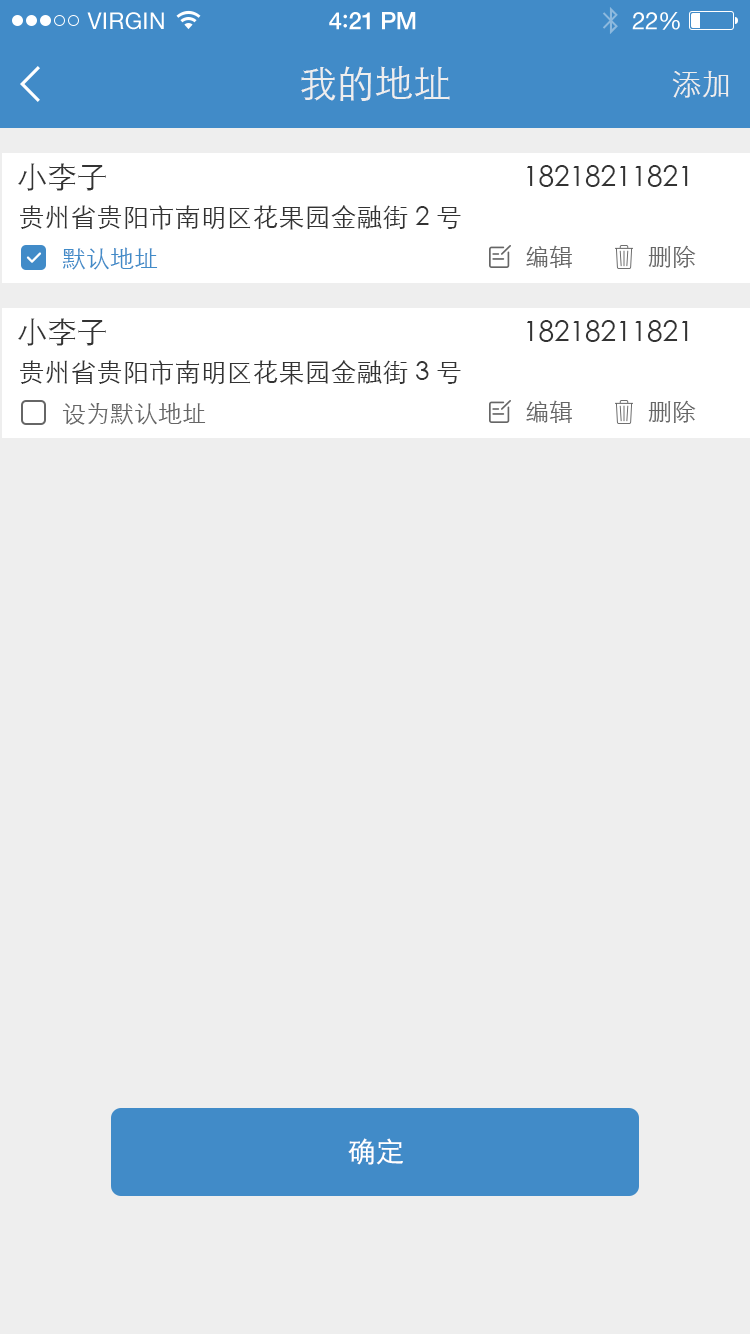
<style>
.page{position:relative;width:750px;height:1334px;background:#eeeeee}
.page>*{position:absolute;margin:0}
.t1{font:23px "HelveticaNeue";letter-spacing:0.02em;color:#ffffff}
.t2{font:24px "HelveticaNeue-Medium";letter-spacing:-0.02em;color:#ffffff}
.t3{font:26px "Avenir-Medium";letter-spacing:-0.02em;color:#ffffff}
.t4{font:24px "HelveticaNeue";letter-spacing:-0.02em;color:#ffffff}
.t5{font:38px "STXihei";color:#eeeeee}
.t6{font:30px "STXihei";color:#eeeeee}
.t7{font:30px "STXihei";color:#333333}
.t8{font:28px "STXihei";color:#333333}
.t9{font:26px "STXihei";color:#333333}
.t10{font:24px "STXihei";color:#666666}
.t11{font:24px "STXihei";color:#418bc8}
.t12{font:28px "STXihei";color:#ffffff}
</style>
<div class="page">
<p class="t1" style="left:87px;top:12px;width:77px;height:18px">VIRGIN</p>
<p class="t2" style="left:329px;top:12px;width:87px;height:18px">4<span class="t3">:</span>21 PM</p>
<p class="t4" style="left:632px;top:12px;width:48px;height:18px">22%</p>
<p class="t5" style="left:301px;top:66px;width:149px;height:35px">我的地址</p>
<p class="t6" style="left:672px;top:70px;width:57px;height:28px">添加</p>
<p class="t7" style="left:18px;top:163px;width:88px;height:28px">小李子</p>
<p class="t8" style="left:527px;top:165px;width:161px;height:22px">18218211821</p>
<p class="t9" style="left:20px;top:205px;width:441px;height:25px">贵州省贵阳市南明区花果园金融街2号</p>
<p class="t10" style="left:526px;top:245px;width:46px;height:23px">编辑</p>
<p class="t10" style="left:648px;top:245px;width:48px;height:23px">删除</p>
<p class="t11" style="left:62px;top:247px;width:96px;height:23px">默认地址</p>
<p class="t7" style="left:18px;top:318px;width:88px;height:28px">小李子</p>
<p class="t8" style="left:527px;top:320px;width:161px;height:22px">18218211821</p>
<p class="t9" style="left:20px;top:360px;width:441px;height:25px">贵州省贵阳市南明区花果园金融街3号</p>
<p class="t10" style="left:526px;top:400px;width:46px;height:23px">编辑</p>
<p class="t10" style="left:648px;top:400px;width:48px;height:23px">删除</p>
<p class="t10" style="left:62px;top:402px;width:144px;height:23px">设为默认地址</p>
<p class="t12" style="left:348px;top:1138px;width:55px;height:27px">确定</p>
</div>
